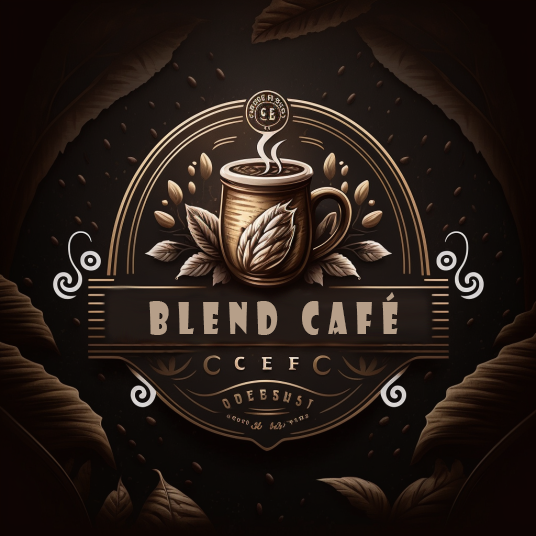
<style>
.page{position:relative;width:536px;height:536px}
.page>*{position:absolute;margin:0}
.t1{font:42px "ShowcardGothic-Reg";letter-spacing:0.3em;color:#b69f89;scale:0.71 1}
</style>
<div class="page">
<p class="t1" style="left:149px;top:292px;width:249px;height:43px">Blend Café</p>
</div>
